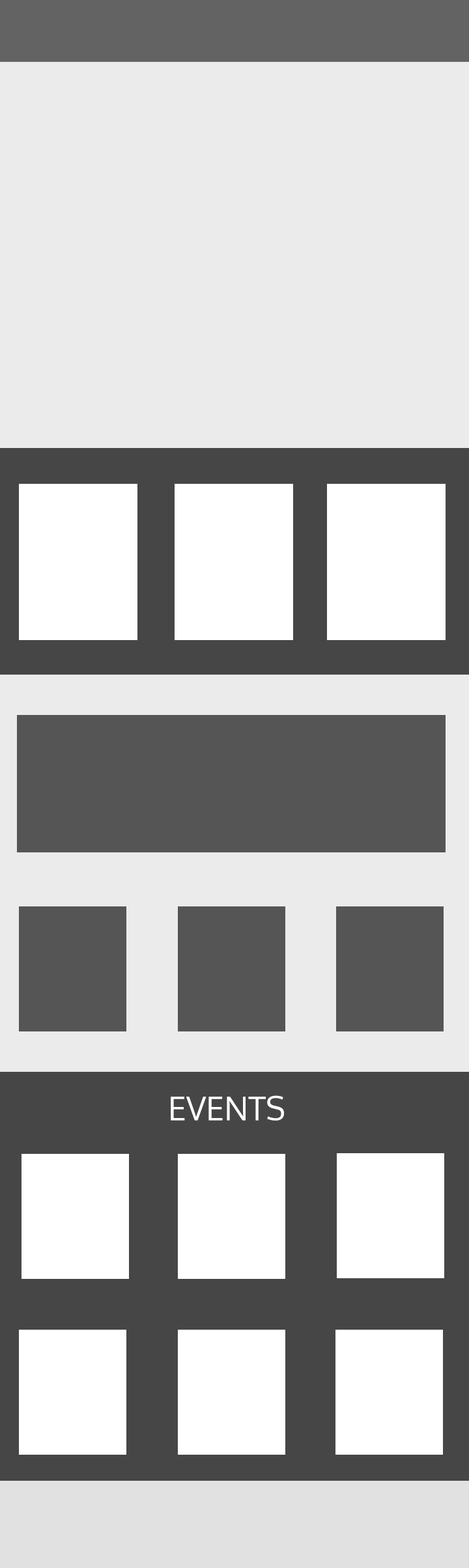
<style>
.page{position:relative;width:469px;height:1568px;background:#ebebeb}
.page>*{position:absolute;margin:0}
.t1{font:32.6px "Oxygen-Regular";color:#ffffff}
</style>
<div class="page">
<p class="t1" style="left:171px;top:1095px;width:113px;height:26px">EVENTS</p>
</div>
